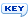
<style>
.page{position:relative;width:28px;height:18px;background:#ffffff}
.page>*{position:absolute;margin:0}
.t1{font:8px "Sevenet7";color:#0036b0;font-weight:bold}
</style>
<div class="page">
<p class="t1" style="left:5px;top:6px;width:19px;height:5px">KEY</p>
</div>
